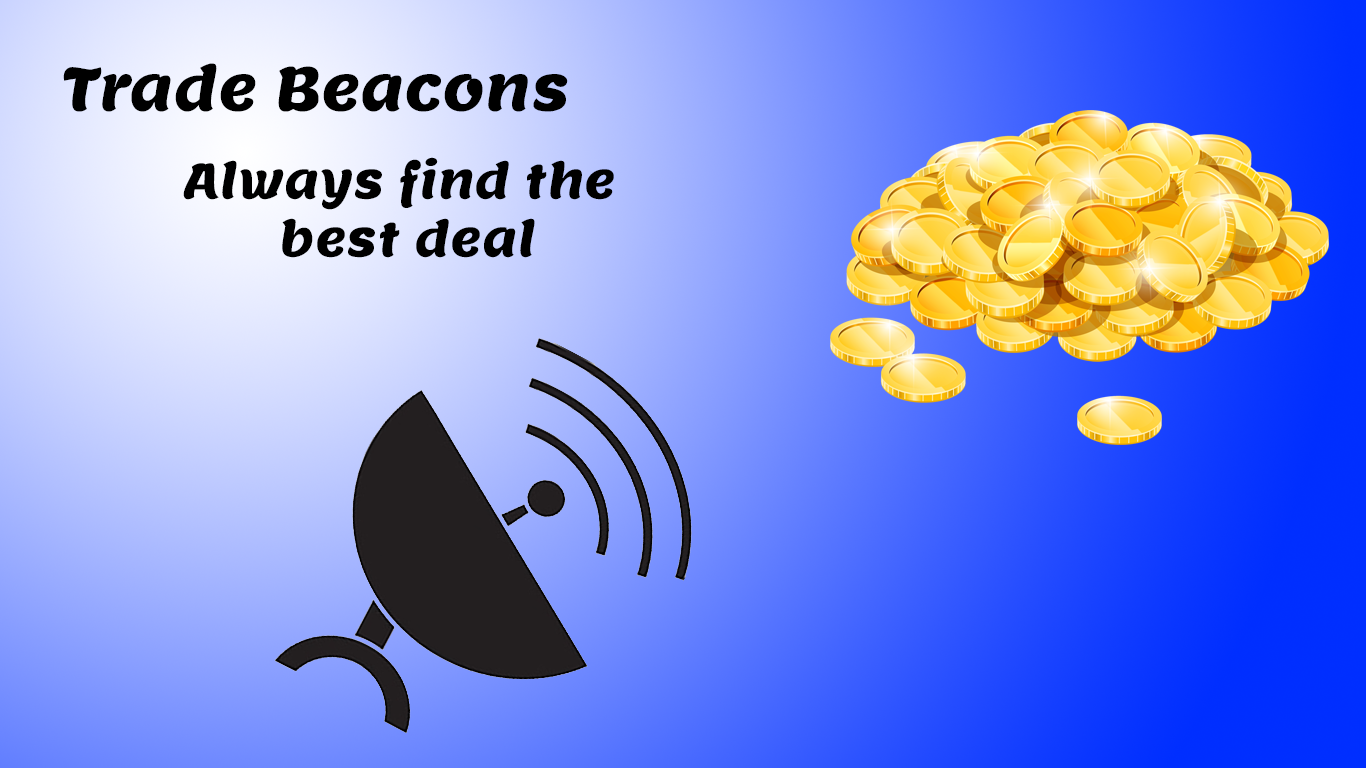
<style>
.page{position:relative;width:1366px;height:768px}
.page>*{position:absolute;margin:0}
.t1{font:60px "Lemon-Regular";color:#000000}
.t2{font:48px "Lemon-Regular";color:#000000}
</style>
<div class="page">
<p class="t1" style="left:63px;top:63px;width:505px;height:49px">Trade Beacons</p>
<p class="t2" style="left:183px;top:157px;width:431px;height:101px;text-align:center">Always find the <br>best deal</p>
</div>
